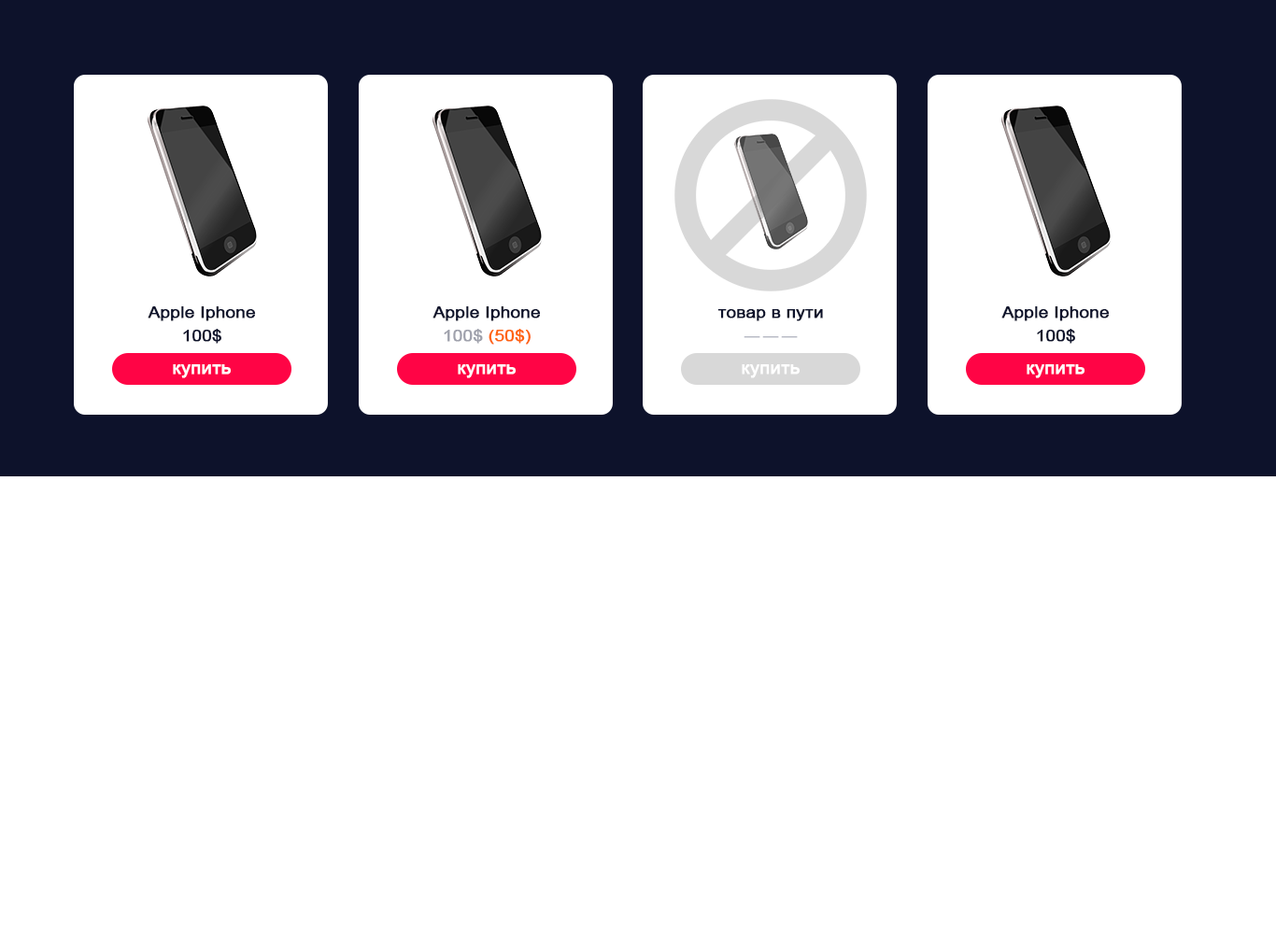
<style>
.page{position:relative;width:1276px;height:934px;background:#ffffff}
.page>*{position:absolute;margin:0}
.t1{font:15.7px "ArialMT";color:#0d122b;font-weight:bold;scale:1.1 1}
.t2{font:15.7px "ArialMT";color:#ff630e;font-weight:bold;scale:1.1 1}
.t3{font:15.7px "ArialMT";color:#9fa1ac;font-weight:bold;scale:1.1 1}
.t4{font:13.4px "ArialMT";color:#b7b9c4;font-weight:bold;scale:3.9 1}
.t5{font:16.8px "ArialMT";color:#ffffff;font-weight:bold;scale:1.1 1}
</style>
<div class="page">
<p class="t1" style="left:148px;top:306px;width:108px;height:15px">Apple Iphone</p>
<p class="t1" style="left:433px;top:306px;width:108px;height:15px">Apple Iphone</p>
<p class="t1" style="left:718px;top:309px;width:105px;height:12px">товар в пути</p>
<p class="t1" style="left:1002px;top:306px;width:108px;height:15px">Apple Iphone</p>
<p class="t1" style="left:183px;top:329px;width:38px;height:15px">100$</p>
<p class="t2" style="left:444px;top:329px;width:87px;height:16px"><span class="t3">100$ </span>(50$)</p>
<p class="t1" style="left:1037px;top:329px;width:38px;height:15px">100$</p>
<p class="t4" style="left:744px;top:336px;width:54px;height:2px">---</p>
<p class="t5" style="left:173px;top:364px;width:58px;height:14px">купить</p>
<p class="t5" style="left:458px;top:364px;width:58px;height:14px">купить</p>
<p class="t5" style="left:742px;top:364px;width:58px;height:14px">купить</p>
<p class="t5" style="left:1027px;top:364px;width:58px;height:14px">купить</p>
</div>
